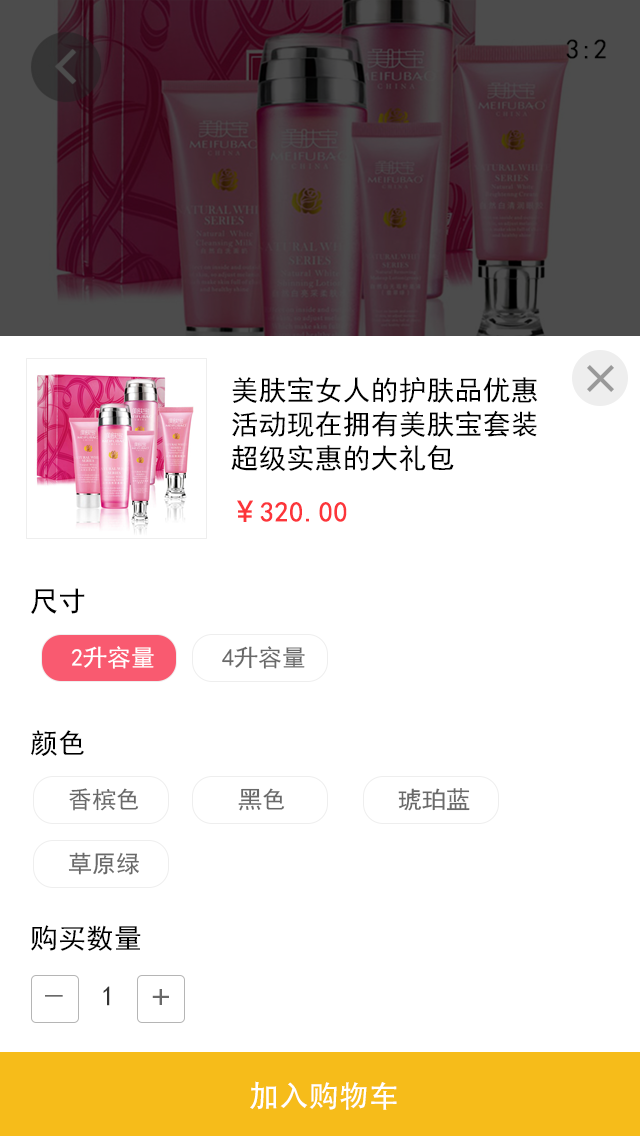
<style>
.page{position:relative;width:640px;height:1136px;background:#ffffff}
.page>*{position:absolute;margin:0}
.t1{font:28px/34px "SimHei";color:#000000}
.t2{font:28px "SimHei";color:#fc353a;font-weight:bold}
.t3{font:28px "MicrosoftYaHei";color:#fc353a;font-weight:bold}
.t4{font:28px "SimHei";color:#000000}
.t5{font:24px "SimHei";color:#ffffff}
.t6{font:24px "SimHei";color:#696969}
.t7{font:28px "SimHei";color:#333333}
.t8{font:36px "SimHei";color:#696969}
.t9{font:30px "AdobeHeitiStd-Regular";color:#ffffff}
</style>
<div class="page">
<p class="t1" style="left:231px;top:376px;width:307px;height:95px">美肤宝女人的护肤品优惠<br>活动现在拥有美肤宝套装<br>超级实惠的大礼包</p>
<p class="t2" style="left:237px;top:500px;width:110px;height:22px"><span class="t3">￥</span>320.00</p>
<p class="t4" style="left:31px;top:588px;width:54px;height:26px">尺寸</p>
<p class="t5" style="left:71px;top:646px;width:83px;height:23px">2升容量</p>
<p class="t6" style="left:222px;top:646px;width:83px;height:23px">4升容量</p>
<p class="t4" style="left:31px;top:730px;width:53px;height:26px">颜色</p>
<p class="t6" style="left:69px;top:788px;width:70px;height:23px">香槟色</p>
<p class="t6" style="left:238px;top:788px;width:47px;height:23px">黑色</p>
<p class="t6" style="left:398px;top:788px;width:72px;height:23px">琥珀蓝</p>
<p class="t6" style="left:68px;top:852px;width:71px;height:23px">草原绿</p>
<p class="t4" style="left:31px;top:925px;width:110px;height:26px">购买数量</p>
<p class="t7" style="left:103px;top:986px;width:7px;height:20px">1</p>
<p class="t8" style="left:152px;top:989px;width:17px;height:16px">+</p>
<p class="t8" style="left:45px;top:995px;width:18px;height:2px">_</p>
<p class="t9" style="left:250px;top:1081px;width:147px;height:29px">加入购物车</p>
</div>
